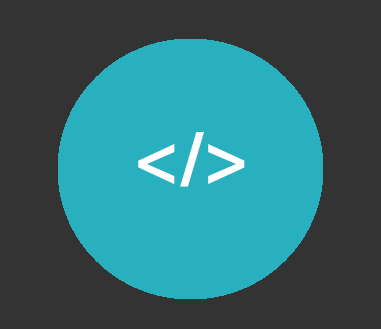
<style>
.page{position:relative;width:381px;height:329px;background:#333333}
.page>*{position:absolute;margin:0}
.t1{font:75px "MyriadPro-Bold";color:#ffffff}
</style>
<div class="page">
<p class="t1" style="left:138px;top:132px;width:107px;height:55px">&lt;/&gt;</p>
</div>
